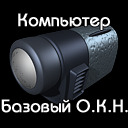
<style>
.page{position:relative;width:128px;height:128px;background:#000000}
.page>*{position:absolute;margin:0}
.t1{font:18px "BauhausC-Medium";color:#ffffff;font-weight:bold}
</style>
<div class="page">
<p class="t1" style="left:18px;top:13px;width:92px;height:17px">Компьютер</p>
<p class="t1" style="left:1px;top:99px;width:127px;height:14px">Базовый О.К.Н.</p>
</div>
